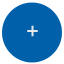
<style>
.page{position:relative;width:64px;height:64px;background:#0061aa}
.page>*{position:absolute;margin:0}
.t1{font:20.8px "FranklinGothic-MediumItalic";letter-spacing:-0.025em;color:#e5e7e8}
</style>
<div class="page">
<p class="t1" style="left:27px;top:25px;width:11px;height:12px">+</p>
</div>
